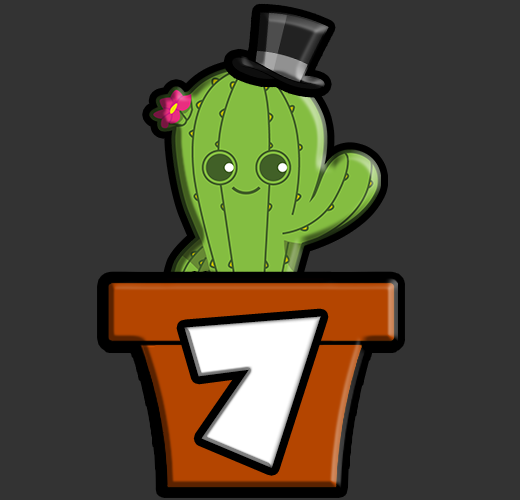
<style>
.page{position:relative;width:520px;height:500px;background:#333333}
.page>*{position:absolute;margin:0}
.t1{font:215.4px "Funhouse";color:#ffffff}
</style>
<div class="page">
<p class="t1" style="left:184px;top:316px;width:137px;height:152px">7</p>
</div>
